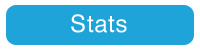
<style>
.page{position:relative;width:200px;height:50px;background:#1ea4d8}
.page>*{position:absolute;margin:0}
.t1{font:24px "Helvetica";letter-spacing:0.02em;color:#ffffff}
</style>
<div class="page">
<p class="t1" style="left:71px;top:14px;width:56px;height:19px">Stats</p>
</div>
